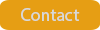
<style>
.page{position:relative;width:100px;height:30px;background:#e69e14}
.page>*{position:absolute;margin:0}
.t1{font:18px "MyriadPro-Regular";color:#d7d9d8}
</style>
<div class="page">
<p class="t1" style="left:21px;top:8px;width:59px;height:13px">Contact</p>
</div>
